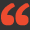
<style>
.page{position:relative;width:30px;height:30px;background:#333333}
.page>*{position:absolute;margin:0}
.t1{font:80px "Georgia";color:#ed4b2f;text-transform:uppercase;font-weight:bold}
</style>
<div class="page">
<p class="t1" style="left:1px;top:3px;width:29px;height:23px">“</p>
</div>
